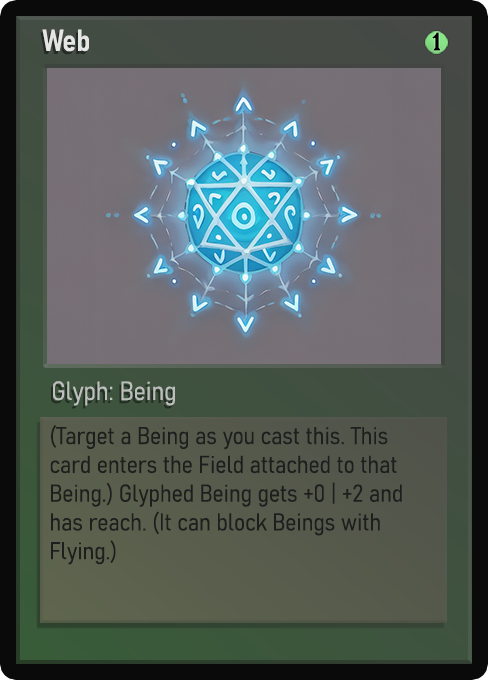
<style>
.page{position:relative;width:488px;height:680px}
.page>*{position:absolute;margin:0}
.t1{font:30px "Bahnschrift-SemiBoldSemiCondensed";color:#f2f2f2;font-weight:bold}
.t2{font:25px "WTRRoycroft";color:#000000;font-weight:bold;scale:1.09 1}
.t3{font:26px "Bahnschrift-LightSemiCondensed";color:#c8c8c8;font-weight:bold}
.t4{font:24px "Bahnschrift-LightSemiCondensed";color:#1e1e1e;font-weight:bold}
</style>
<div class="page">
<p class="t1" style="left:42px;top:29px;width:47px;height:23px;opacity:0.9">Web</p>
<p class="t2" style="left:432px;top:32px;width:9px;height:19px">1</p>
<p class="t3" style="left:53px;top:381px;width:122px;height:25px;opacity:0.9">Glyph: Being</p>
<p class="t4" style="left:50px;top:425px;width:352px;height:140px">(Target a Being as you cast this. This card enters the Field attached to that Being.) Glyphed Being gets +0 | +2 and has reach. (It can block Beings with Flying.)</p>
</div>
